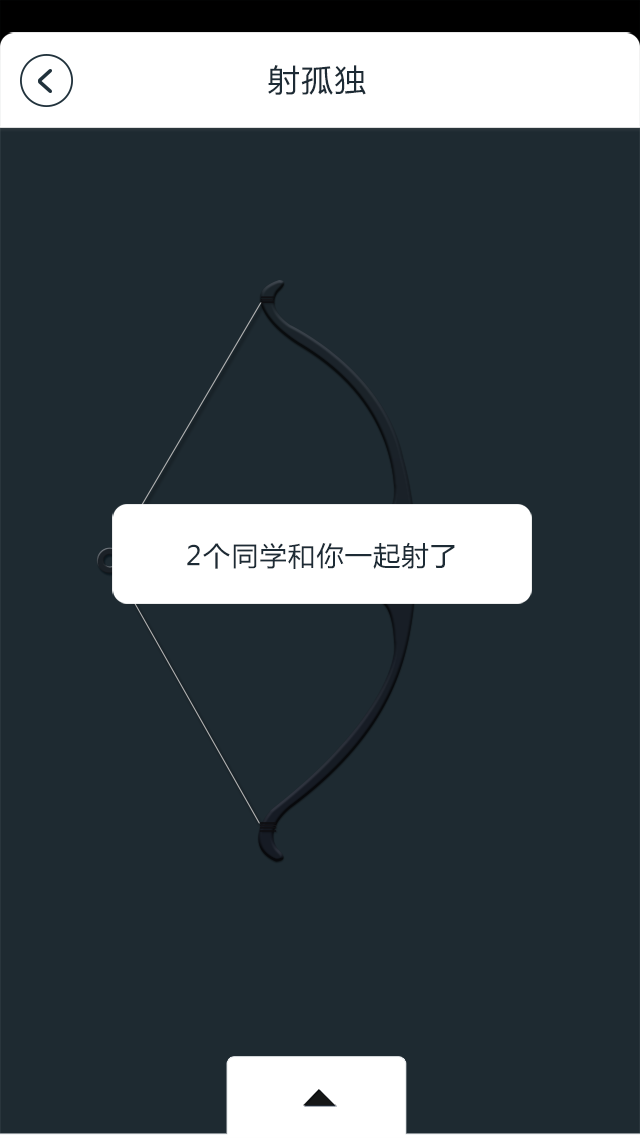
<style>
.page{position:relative;width:640px;height:1138px;background:#1e2a31}
.page>*{position:absolute;margin:0}
.t1{font:31.1px "MicrosoftYaHei";letter-spacing:0.05em;color:#1d2b35}
.t2{font:26.7px "MicrosoftYaHei";letter-spacing:0.05em;color:#1d2b35}
</style>
<div class="page">
<p class="t1" style="left:268px;top:65px;width:98px;height:30px">射孤独</p>
<p class="t2" style="left:187px;top:542px;width:268px;height:27px">2个同学和你一起射了</p>
</div>
